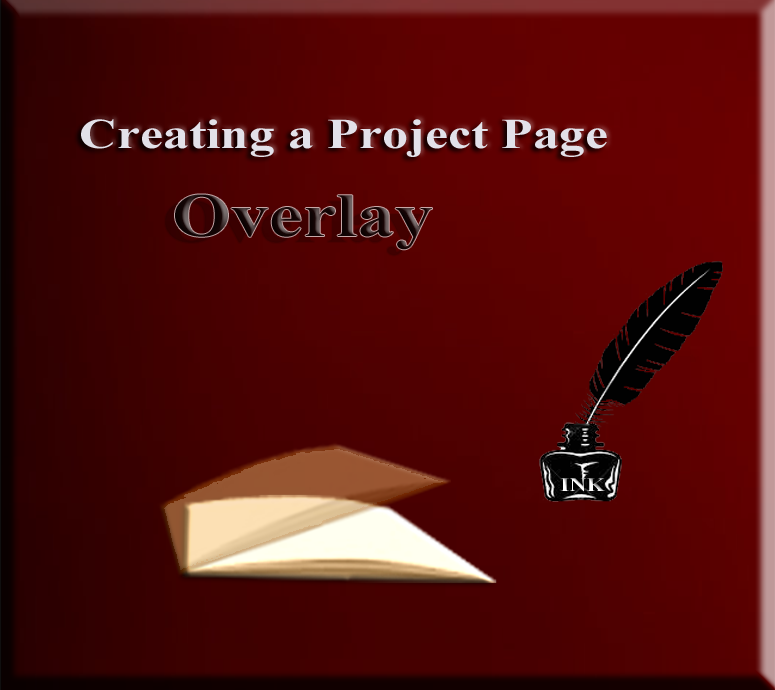
<style>
.page{position:relative;width:775px;height:690px}
.page>*{position:absolute;margin:0}
.t1{font:42.2px "TimesNewRomanPS-BoldMT";color:#e2e1e9;scale:1.23 1}
.t2{font:61.5px "TimesNewRomanPS-BoldMT";scale:1.23 1}
.t3{font:19.1px "TimesNewRomanPS-BoldMT";color:#fefefe;scale:1.23 1}
</style>
<div class="page">
<p class="t1" style="left:81px;top:119px;width:526px;height:38px">Creating a Project Page</p>
<p class="t2" style="left:175px;top:194px;width:257px;height:56px">Overlay</p>
<p class="t3" style="left:560px;top:478px;width:45px;height:14px">INK</p>
</div>
